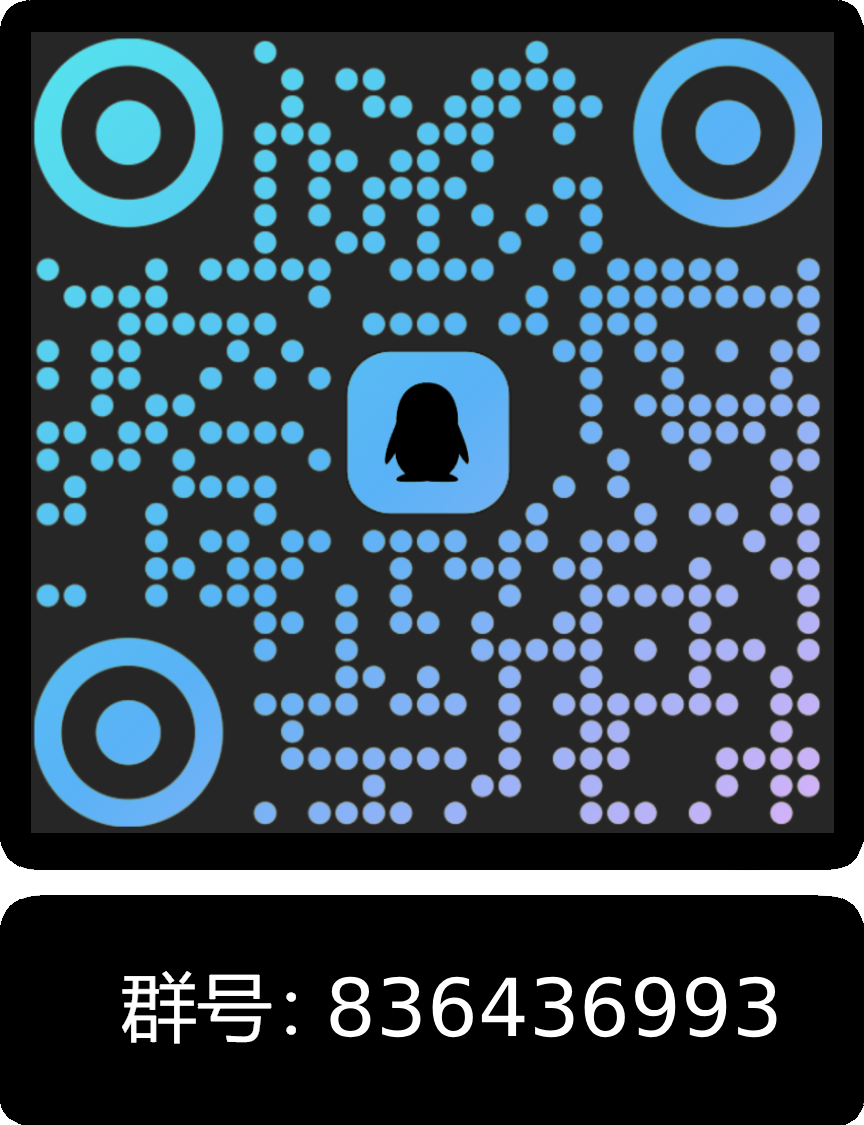
<style>
.page{position:relative;width:864px;height:1125px;background:#262626}
.page>*{position:absolute;margin:0}
.t1{font:80px "DejaVuSans";color:#ffffff}
</style>
<div class="page">
<p class="t1" style="left:330px;top:976px;width:447px;height:62px">836436993</p>
</div>
